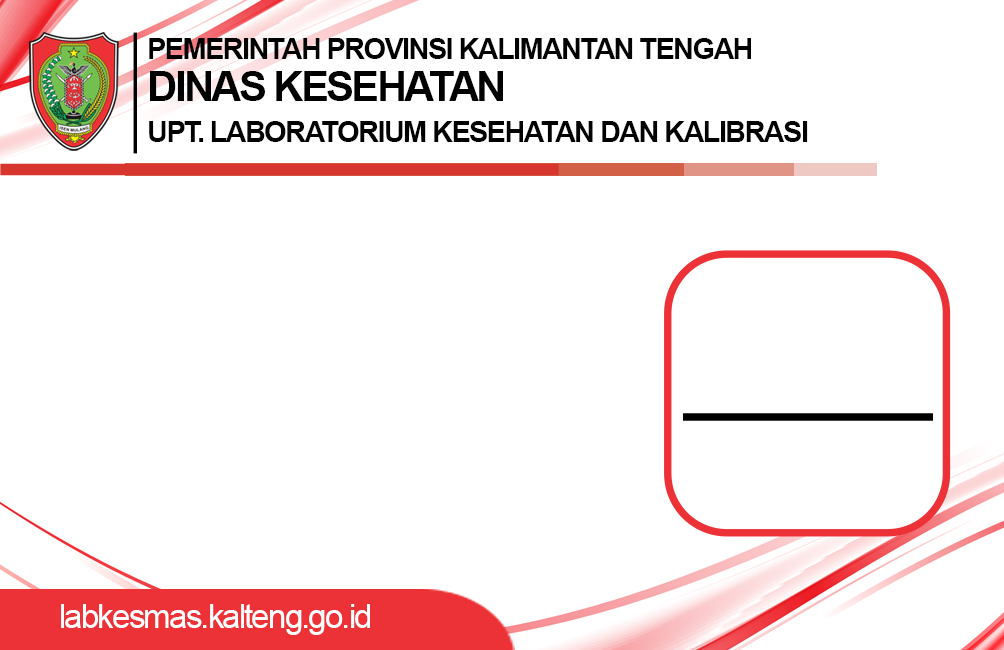
<style>
.page{position:relative;width:1004px;height:650px;background:#ffffff}
.page>*{position:absolute;margin:0}
.t1{font:29.2px/41.7px "Arial-BoldMT";letter-spacing:-0.06em;color:#000000}
.t2{font:41.7px/41.7px "Arial-BoldMT";letter-spacing:-0.06em;color:#000000}
.t3{font:33.3px "ArialMT";letter-spacing:-0.06em;color:#ffffff}
</style>
<div class="page">
<p class="t1" style="left:149px;top:38px;width:659px;height:104px">PEMERINTAH PROVINSI KALIMANTAN TENGAH<br><span class="t2">DINAS KESEHATAN<br></span>UPT. LABORATORIUM KESEHATAN DAN KALIBRASI</p>
<p class="t3" style="left:61px;top:604px;width:309px;height:31px">labkesmas.kalteng.go.id</p>
</div>
